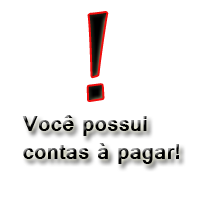
<style>
.page{position:relative;width:200px;height:200px;background:#ffffff}
.page>*{position:absolute;margin:0}
.t1{font:120px "CharlemagneStd-Bold";color:#000000}
.t2{font:24px "Vrinda-Bold"}
</style>
<div class="page">
<p class="t1" style="left:88px;top:13px;width:19px;height:87px">!</p>
<p class="t2" style="left:22px;top:115px;width:157px;height:49px">Você possui <br>contas à pagar!</p>
</div>
